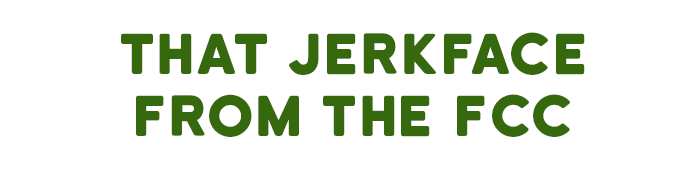
<style>
.page{position:relative;width:698px;height:173px;background:#ffffff}
.page>*{position:absolute;margin:0}
.t1{font:54.5px/62.1px "KatahdinRound-Regular";color:#36680e}
</style>
<div class="page">
<p class="t1" style="left:121px;top:32px;width:464px;height:105px;text-align:center">THAT JERKFACE<br>FROM THE FCC</p>
</div>
